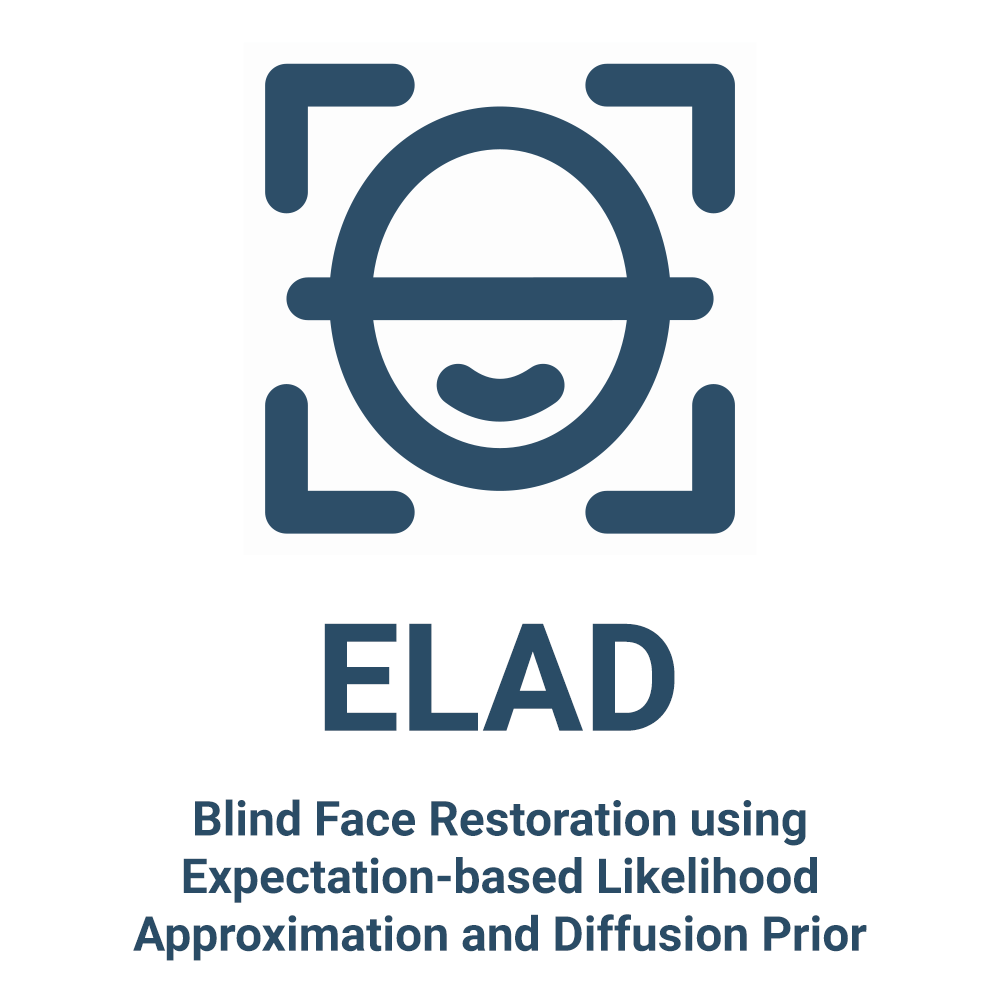
<style>
.page{position:relative;width:1000px;height:1000px;background:#ffffff}
.page>*{position:absolute;margin:0}
.t1{font:150px "Roboto-Bold";color:#2a4c66}
.t2{font:48px "Roboto-Bold";color:#2a4c66}
</style>
<div class="page">
<p class="t1" style="left:324px;top:623px;width:351px;height:108px">ELAD</p>
<p class="t2" style="left:133px;top:799px;width:734px;height:162px;text-align:center">Blind Face Restoration using Expectation-based Likelihood Approximation and Diffusion Prior</p>
</div>
